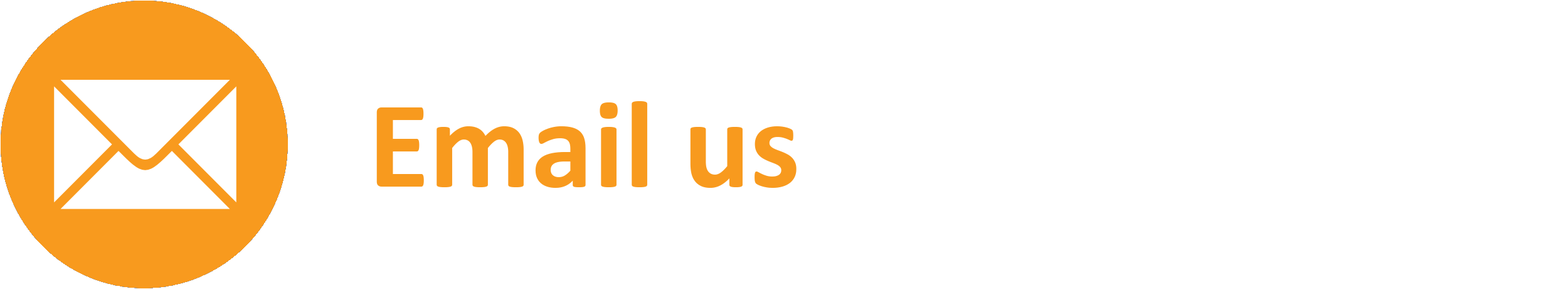
<style>
.page{position:relative;width:1568px;height:289px;background:#ffffff}
.page>*{position:absolute;margin:0}
.t1{font:125.4px "Calibri-Bold";color:#f89a1e}
</style>
<div class="page">
<p class="t1" style="left:376px;top:101px;width:421px;height:87px">Email us</p>
</div>
